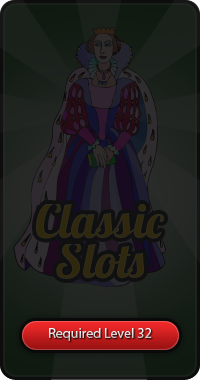
<style>
.page{position:relative;width:200px;height:380px}
.page>*{position:absolute;margin:0}
.t1{font:48px "Lobster1.4";color:#2f280e}
.t2{font:14px "MyriadPro-Regular"}
</style>
<div class="page">
<p class="t1" style="left:36px;top:204px;width:128px;height:35px">Classic</p>
<p class="t1" style="left:56px;top:244px;width:88px;height:35px">Slots</p>
<p class="t2" style="left:49px;top:328px;width:103px;height:13px">Required Level 32</p>
</div>
